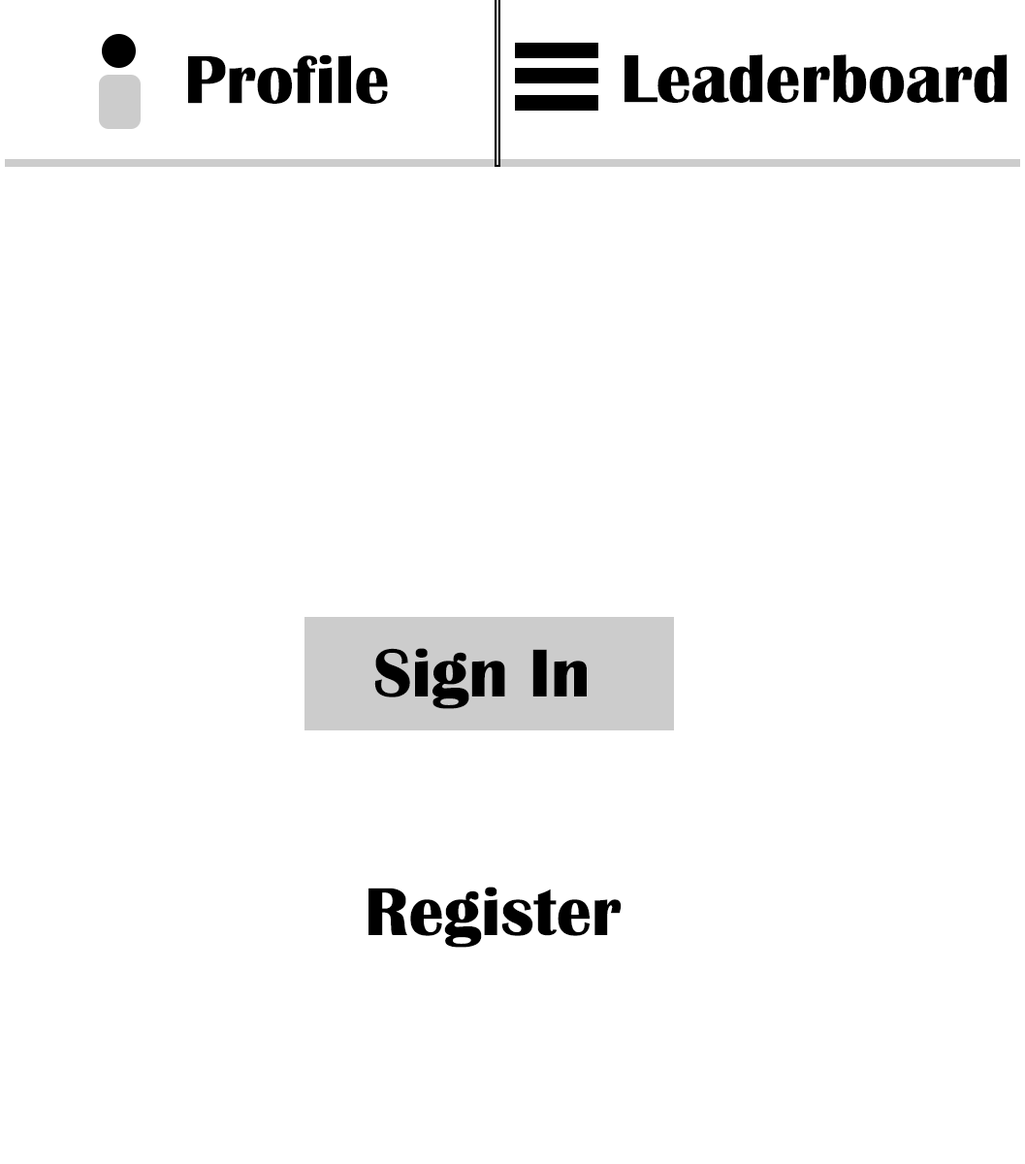
<style>
.page{position:relative;width:1025px;height:1164px;background:#ffffff}
.page>*{position:absolute;margin:0}
.t1{font:69.8px "BritannicBold";color:#000000}
</style>
<div class="page">
<p class="t1" style="left:188px;top:54px;width:200px;height:50px">Profile</p>
<p class="t1" style="left:624px;top:54px;width:383px;height:49px">Leaderboard</p>
<p class="t1" style="left:374px;top:648px;width:213px;height:61px">Sign In</p>
<p class="t1" style="left:368px;top:886px;width:254px;height:61px">Register</p>
</div>
